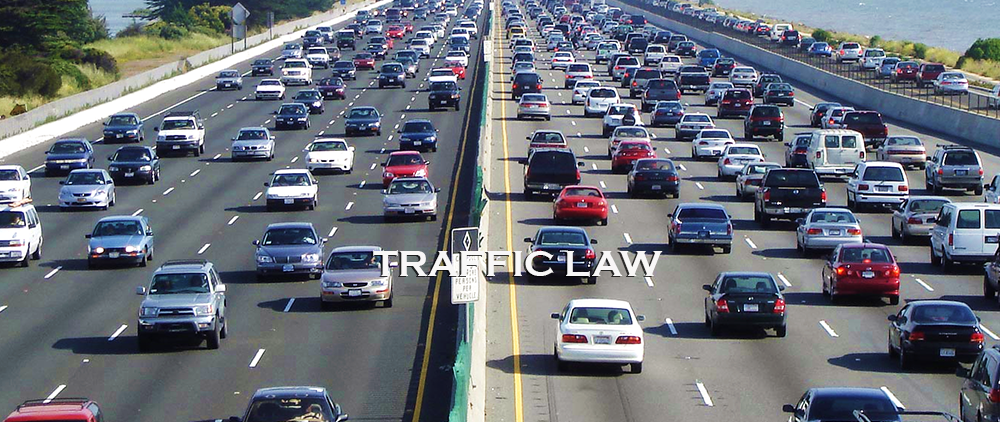
<style>
.page{position:relative;width:1000px;height:422px}
.page>*{position:absolute;margin:0}
.t1{font:37px "CopperplateGothic-Bold";color:#f8f7f7}
</style>
<div class="page">
<p class="t1" style="left:373px;top:250px;width:290px;height:27px">TRAFFIC LAW</p>
</div>
